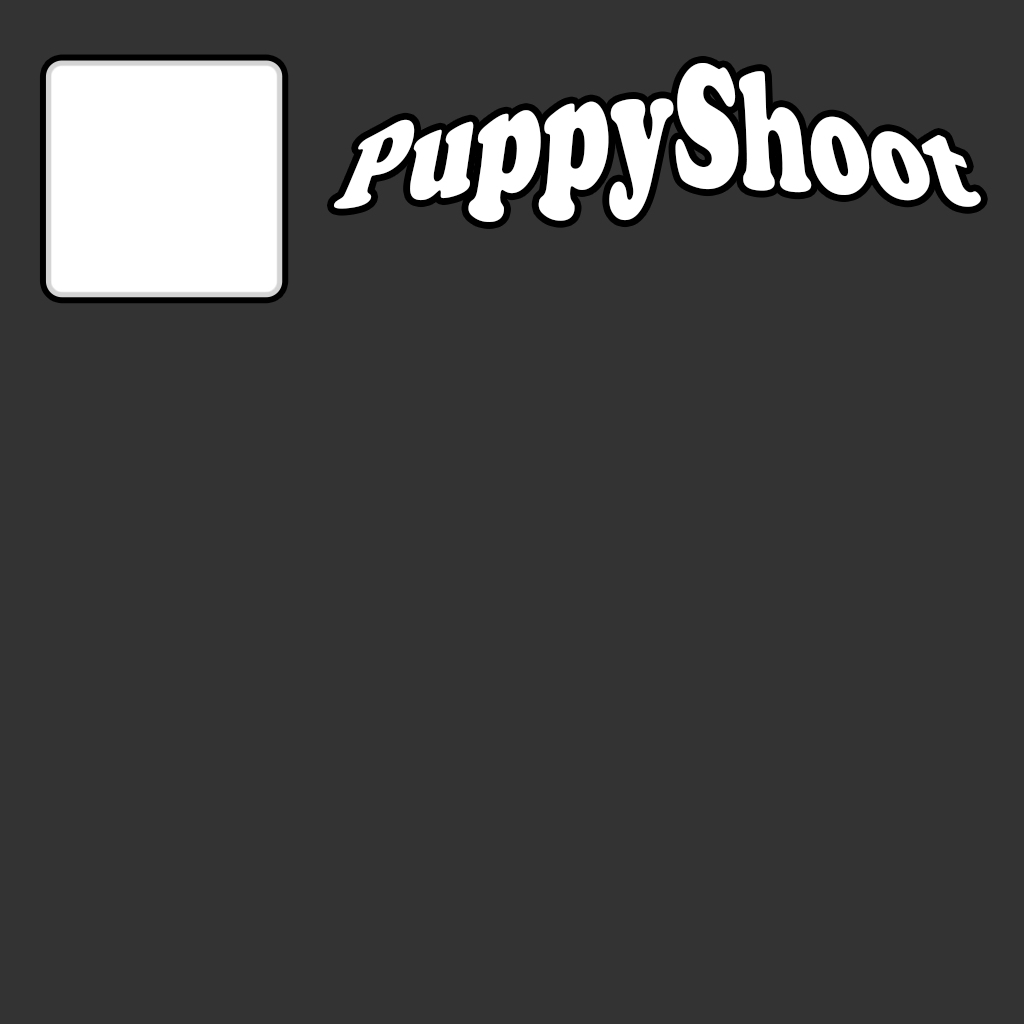
<style>
.page{position:relative;width:1024px;height:1024px;background:#333333}
.page>*{position:absolute;margin:0}
.t1{font:100px "CooperBlack";color:#ffffff}
</style>
<div class="page">
<p class="t1" style="left:333px;top:63px;width:648px;height:159px">PuppyShoot</p>
</div>
